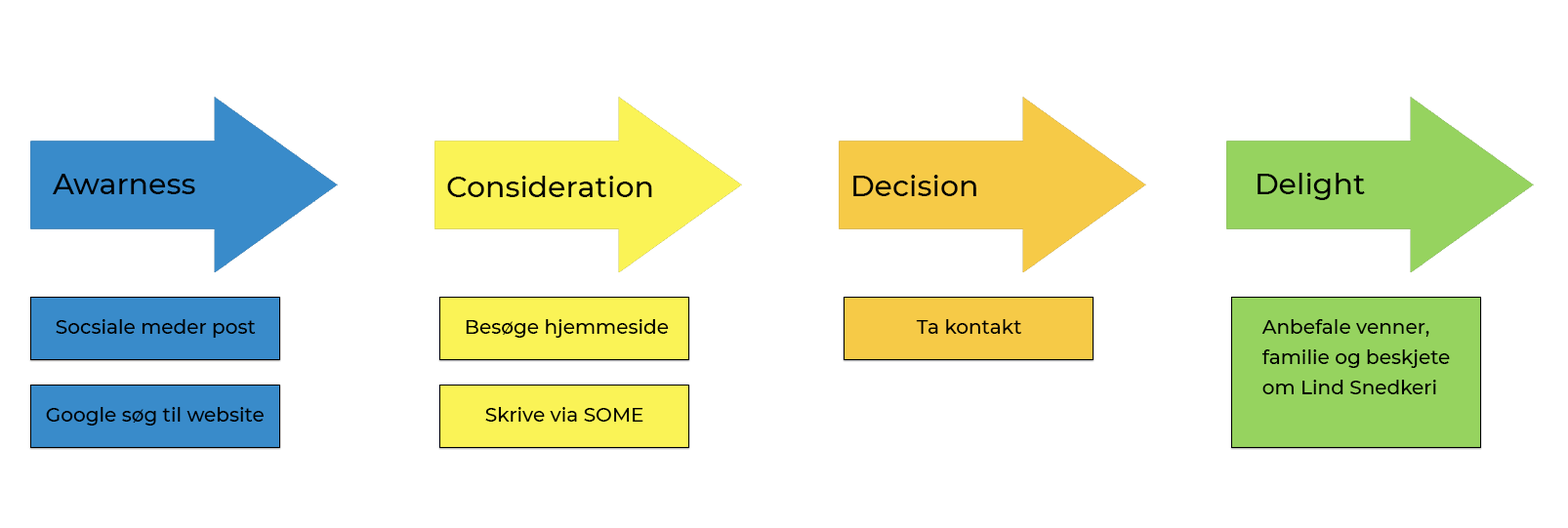
<style>
.page{position:relative;width:1568px;height:528px;background:#ffffff}
.page>*{position:absolute;margin:0}
.t1{font:29.3px "Montserrat-Medium";color:#000000}
.t2{font:19.5px "Montserrat-Medium";color:#000000}
.t3{font:19.5px/30.5px "Montserrat-Medium";color:#000000}
</style>
<div class="page">
<p class="t1" style="left:53px;top:174px;width:142px;height:20px">Awarness</p>
<p class="t1" style="left:1258px;top:173px;width:107px;height:27px">Delight</p>
<p class="t1" style="left:447px;top:176px;width:205px;height:21px">Consideration</p>
<p class="t1" style="left:853px;top:175px;width:123px;height:21px">Decision</p>
<p class="t2" style="left:56px;top:319px;width:200px;height:19px">Socsiale meder post</p>
<p class="t2" style="left:466px;top:319px;width:203px;height:19px">Besøge hjemmeside</p>
<p class="t2" style="left:916px;top:319px;width:105px;height:15px">Ta kontakt</p>
<p class="t3" style="left:1261px;top:319px;width:189px;height:75px">Anbefale venner, <br>familie og beskjete<br>om Lind Snedkeri</p>
<p class="t2" style="left:46px;top:407px;width:218px;height:19px">Google søg til website</p>
<p class="t2" style="left:485px;top:407px;width:158px;height:15px">Skrive via SOME</p>
</div>
